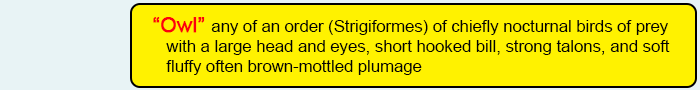
<style>
.page{position:relative;width:700px;height:90px;background:#fff200}
.page>*{position:absolute;margin:0}
.t1{font:16.7px "ArialMT";color:#020202}
.t2{font:20.8px "ArialMT";color:#fd010d;font-weight:bold}
</style>
<div class="page">
<p class="t1" style="left:153px;top:17px;width:517px;height:58px"><span class="t2">“Owl” </span>any of an order (Strigiformes) of chiefly nocturnal birds of prey <br>   with a large head and eyes, short hooked bill, strong talons, and soft <br>   fluffy often brown-mottled plumage</p>
</div>
